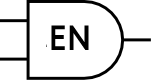
<style>
.page{position:relative;width:151px;height:80px;background:#ffffff}
.page>*{position:absolute;margin:0}
.t1{font:33.1px "LeonSans-Bold";color:#000000}
</style>
<div class="page">
<p class="t1" style="left:51px;top:25px;width:38px;height:25px">EN</p>
</div>
